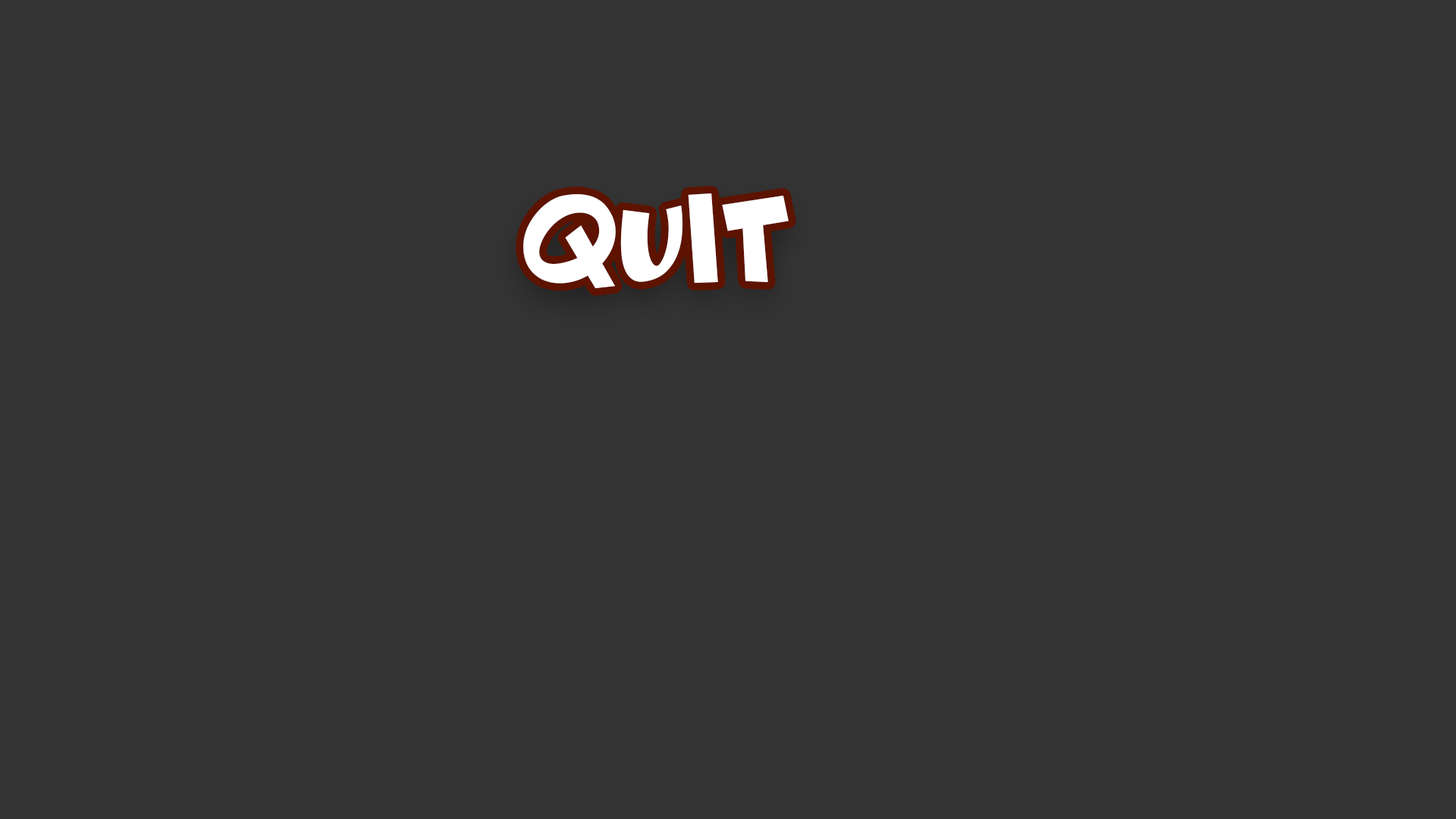
<style>
.page{position:relative;width:1456px;height:819px;background:#333333}
.page>*{position:absolute;margin:0}
.t1{font:136.8px "BLOCKHEADDUDEPersonalUse";color:#ffffff;scale:0.83 1}
</style>
<div class="page">
<p class="t1" style="left:523px;top:193px;width:266px;height:95px">quit</p>
</div>
